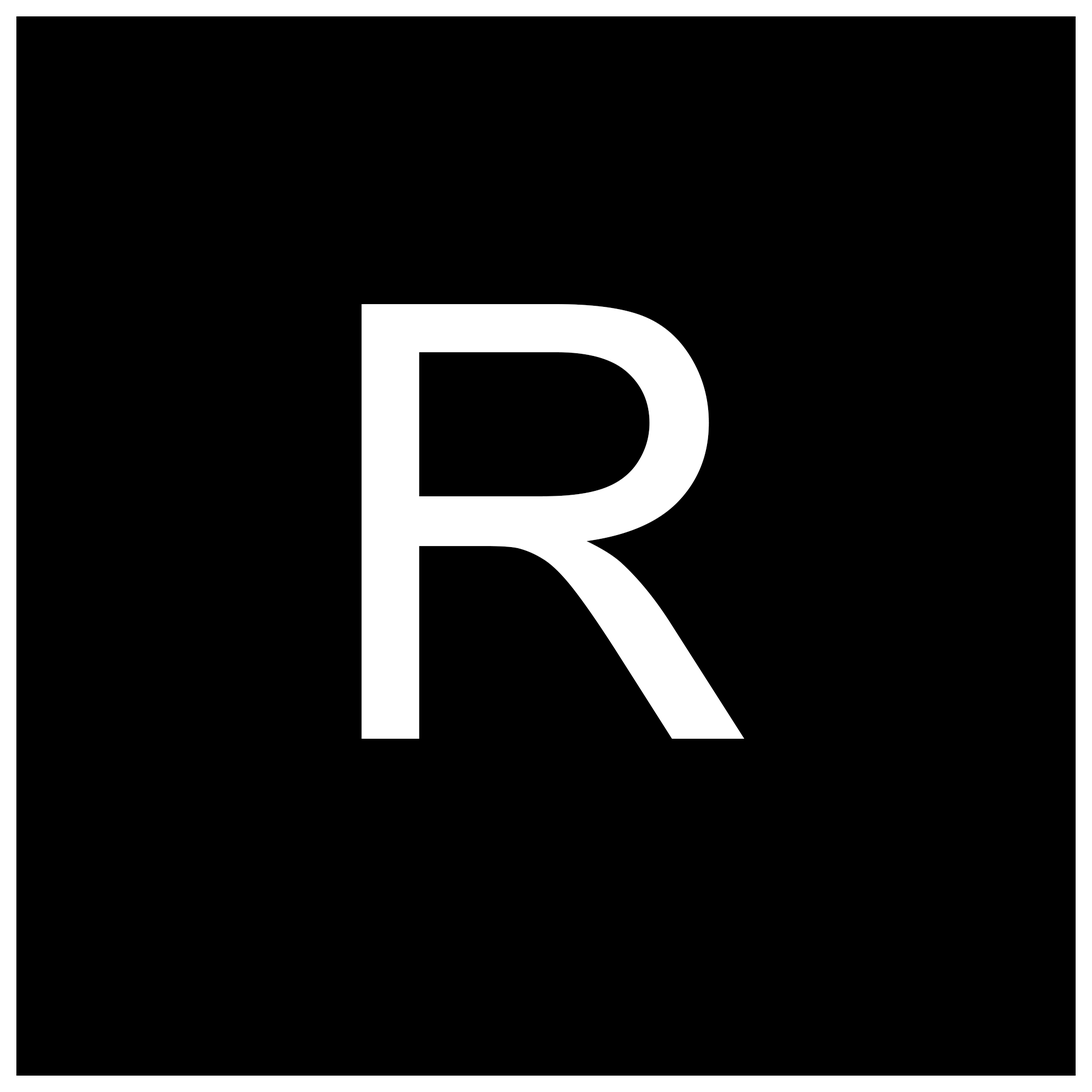
<style>
.page{position:relative;width:1092px;height:1092px;background:#000000}
.page>*{position:absolute;margin:0}
.t1{font:606.7px "ArialMT";color:#ffffff}
</style>
<div class="page">
<p class="t1" style="left:361px;top:304px;width:383px;height:435px">R</p>
</div>
